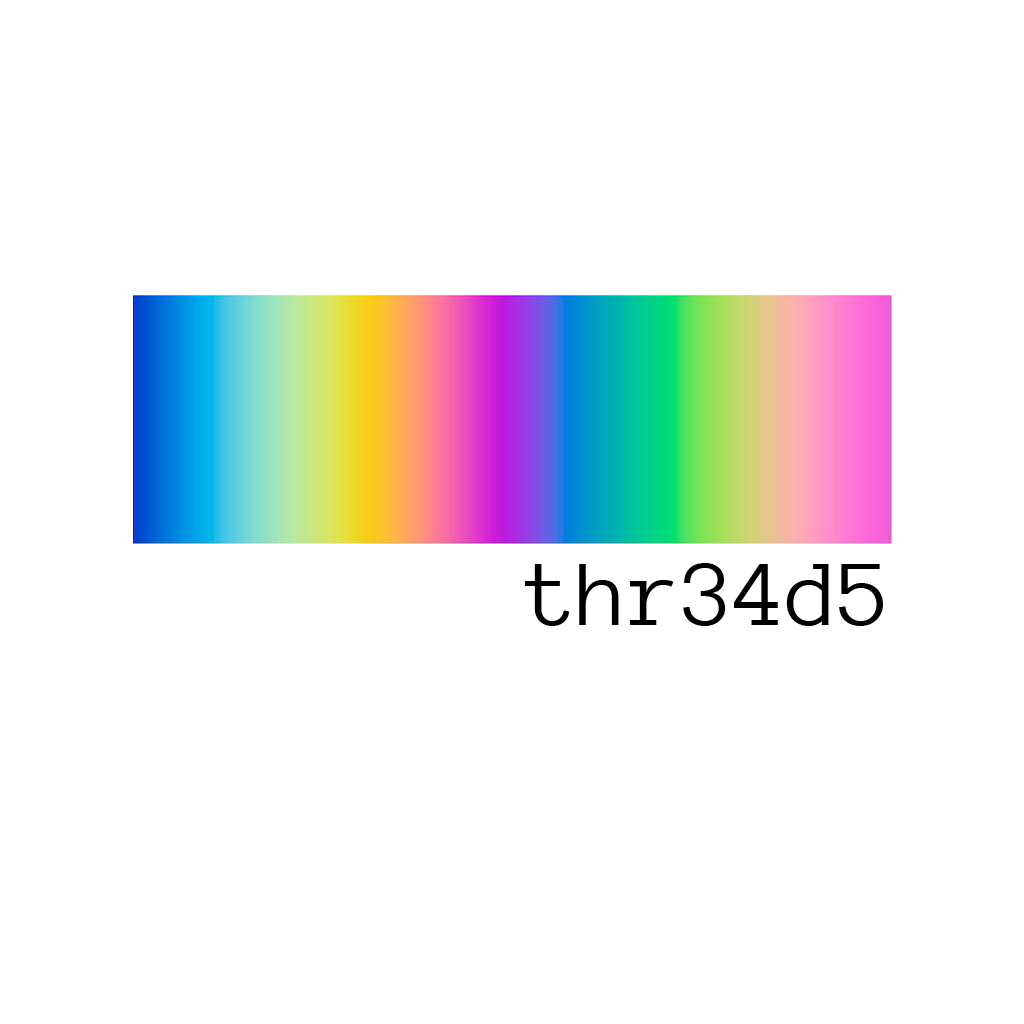
<style>
.page{position:relative;width:1024px;height:1024px;background:#ffffff}
.page>*{position:absolute;margin:0}
.t1{font:96px "AnonymousPro-Regular";color:#000000}
</style>
<div class="page">
<p class="t1" style="left:525px;top:563px;width:358px;height:63px">thr34d5</p>
</div>
